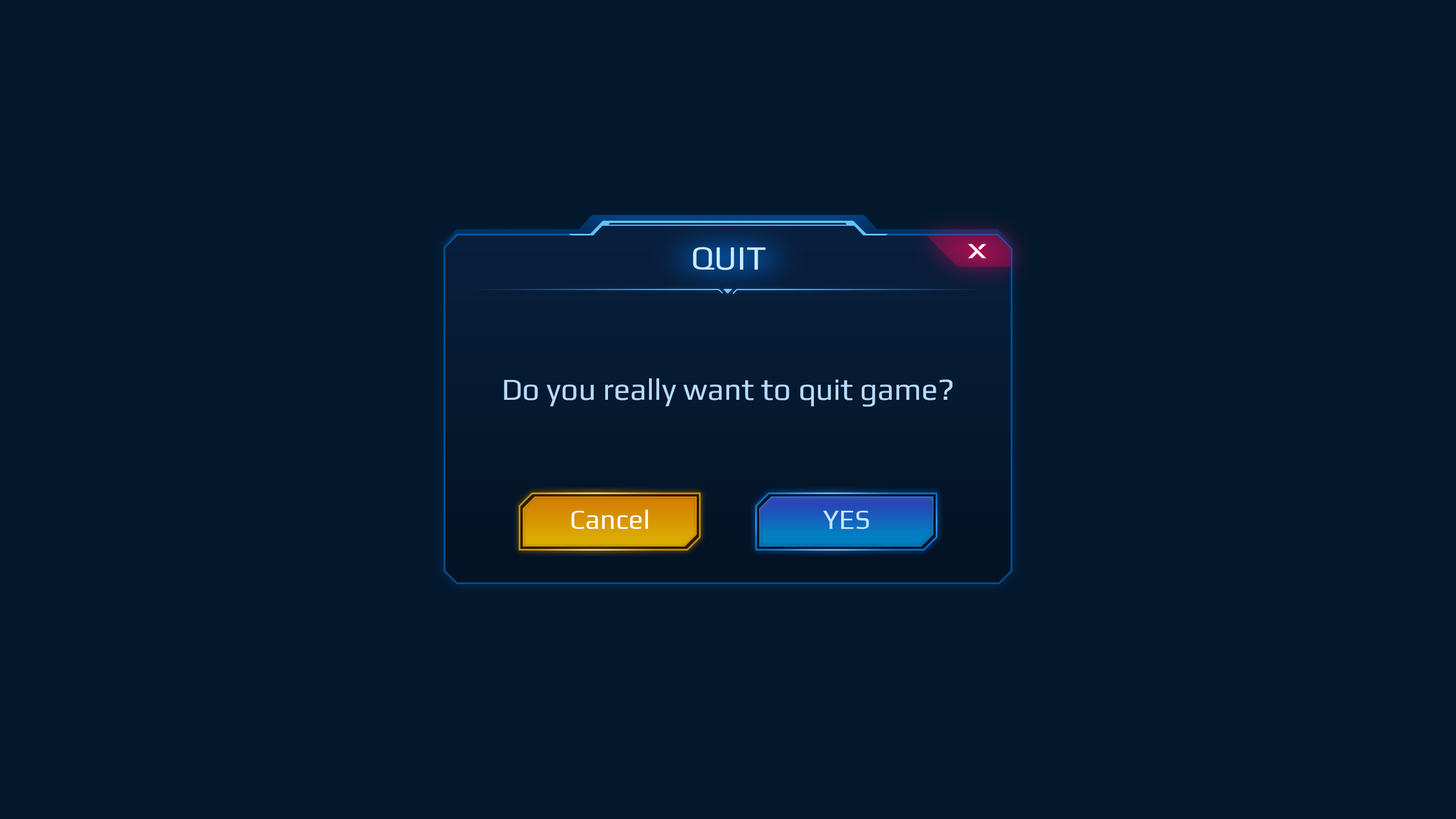
<style>
.page{position:relative;width:1456px;height:819px;background:#03182d}
.page>*{position:absolute;margin:0}
.t1{font:34.1px "Play-Regular";color:#b7dbff}
.t2{font:30.7px "Play-Regular";color:#b7dbff}
.t3{font:27.3px "Play-Regular";color:#ffffff}
.t4{font:27.3px "Play-Regular";color:#c6e2ff}
</style>
<div class="page">
<p class="t1" style="left:693px;top:247px;width:73px;height:23px">QUIT</p>
<p class="t2" style="left:504px;top:378px;width:449px;height:29px">Do you really want to quit game?</p>
<p class="t3" style="left:572px;top:510px;width:76px;height:19px">Cancel</p>
<p class="t4" style="left:823px;top:511px;width:46px;height:18px">YES</p>
</div>
